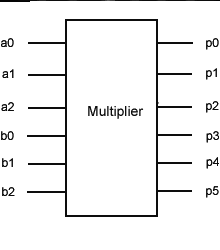
<style>
.page{position:relative;width:220px;height:250px;background:#ffffff}
.page>*{position:absolute;margin:0}
.t1{font:12px "ArialMT"}
.t2{font:14px "ArialMT"}
</style>
<div class="page">
<p class="t1" style="left:1px;top:37px;width:13px;height:9px">a0</p>
<p class="t1" style="left:206px;top:37px;width:13px;height:12px">p0</p>
<p class="t1" style="left:2px;top:68px;width:12px;height:9px">a1</p>
<p class="t1" style="left:206px;top:67px;width:11px;height:12px">p1</p>
<p class="t1" style="left:206px;top:100px;width:13px;height:12px">p2</p>
<p class="t2" style="left:88px;top:105px;width:56px;height:13px">Multiplier</p>
<p class="t1" style="left:1px;top:130px;width:13px;height:9px">b0</p>
<p class="t1" style="left:206px;top:130px;width:13px;height:12px">p3</p>
<p class="t1" style="left:2px;top:157px;width:11px;height:9px">b1</p>
<p class="t1" style="left:206px;top:156px;width:13px;height:12px">p4</p>
<p class="t1" style="left:206px;top:185px;width:13px;height:12px">p5</p>
<p class="t1" style="left:2px;top:186px;width:13px;height:9px">b2</p>
</div>
